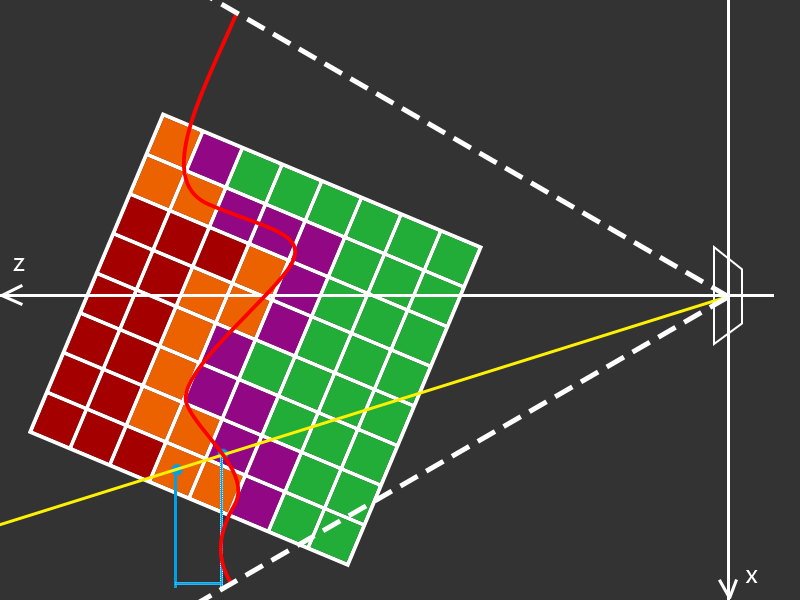
<style>
.page{position:relative;width:800px;height:600px;background:#333333}
.page>*{position:absolute;margin:0}
.t1{font:24.4px "MicrosoftYaHei";color:#ffffff}
.t2{font:24px "MicrosoftYaHei";color:#ffffff}
</style>
<div class="page">
<p class="t1" style="left:13px;top:258px;width:12px;height:13px">z</p>
<p class="t2" style="left:745px;top:570px;width:13px;height:13px">x</p>
</div>
